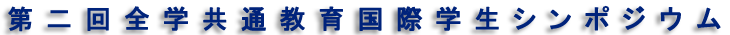
<style>
.page{position:relative;width:730px;height:35px;background:#ffffff}
.page>*{position:absolute;margin:0}
.t1{font:26.4px "MS-PGothic";letter-spacing:0.48em;color:#00237b;font-weight:bold}
</style>
<div class="page">
<p class="t1" style="left:8px;top:5px;width:713px;height:27px">第二回全学共通教育国際学生シンポジウム</p>
</div>
